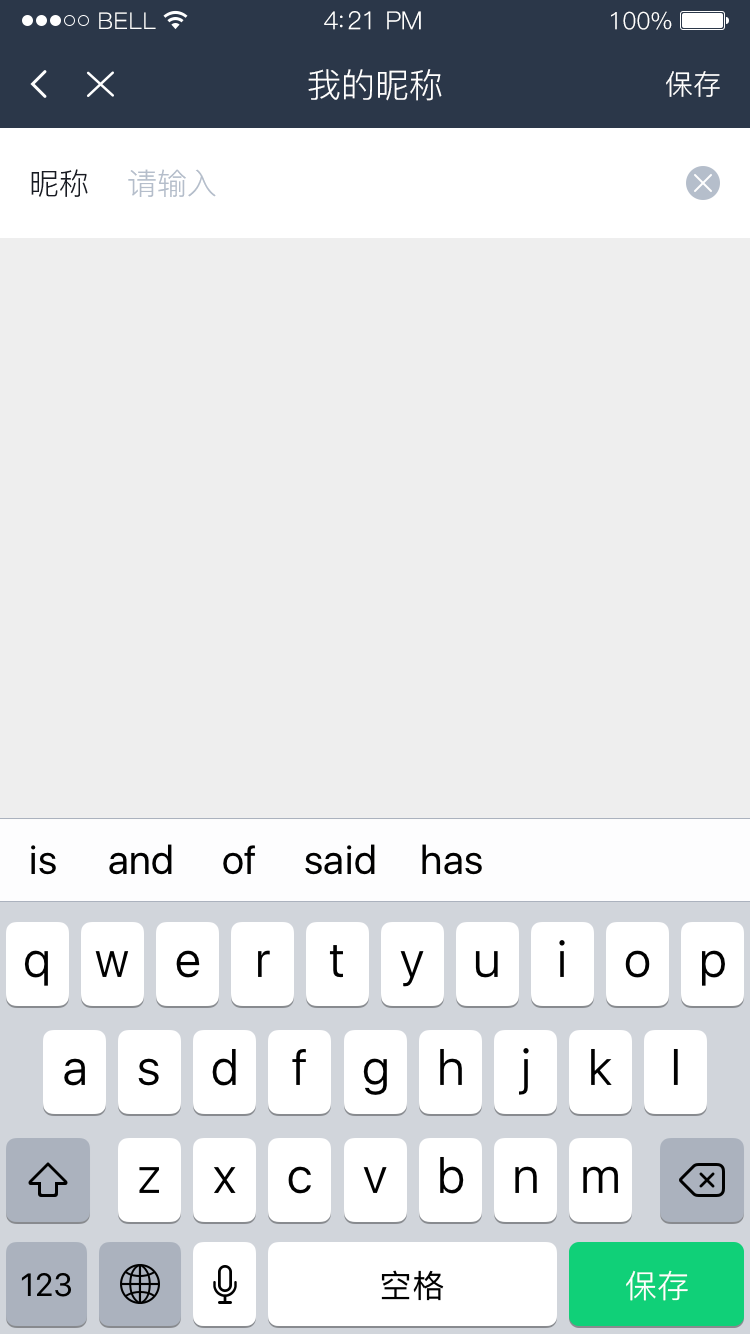
<style>
.page{position:relative;width:750px;height:1334px;background:#eeeeee}
.page>*{position:absolute;margin:0}
.t1{font:23px "PingFang-SC-Regular";letter-spacing:0.02em;color:#ffffff}
.t2{font:25px "PingFang-SC-Regular";letter-spacing:-0.02em;color:#ffffff}
.t3{font:24px "PingFang-SC-Regular";letter-spacing:-0.02em;color:#ffffff}
.t4{font:34px "PingFang-SC-Regular";color:#ffffff}
.t5{font:28px "PingFang-SC-Regular";color:#ffffff}
.t6{font:30px "PingFang-SC-Regular";color:#181b23}
.t7{font:30px "PingFang-SC-Regular";color:#b5becb}
.t8{font:32px "PingFang-SC-Regular";color:#ffffff}
</style>
<div class="page">
<p class="t1" style="left:99px;top:12px;width:57px;height:17px">BELL</p>
<p class="t2" style="left:324px;top:11px;width:97px;height:19px">4:21 PM</p>
<p class="t3" style="left:611px;top:11px;width:61px;height:19px">100%</p>
<p class="t4" style="left:308px;top:69px;width:134px;height:32px">我的昵称</p>
<p class="t5" style="left:666px;top:71px;width:54px;height:26px">保存</p>
<p class="t6" style="left:31px;top:169px;width:57px;height:28px">昵称</p>
<p class="t7" style="left:128px;top:169px;width:88px;height:28px">请输入</p>
<p class="t8" style="left:626px;top:1270px;width:62px;height:31px">保存</p>
</div>
